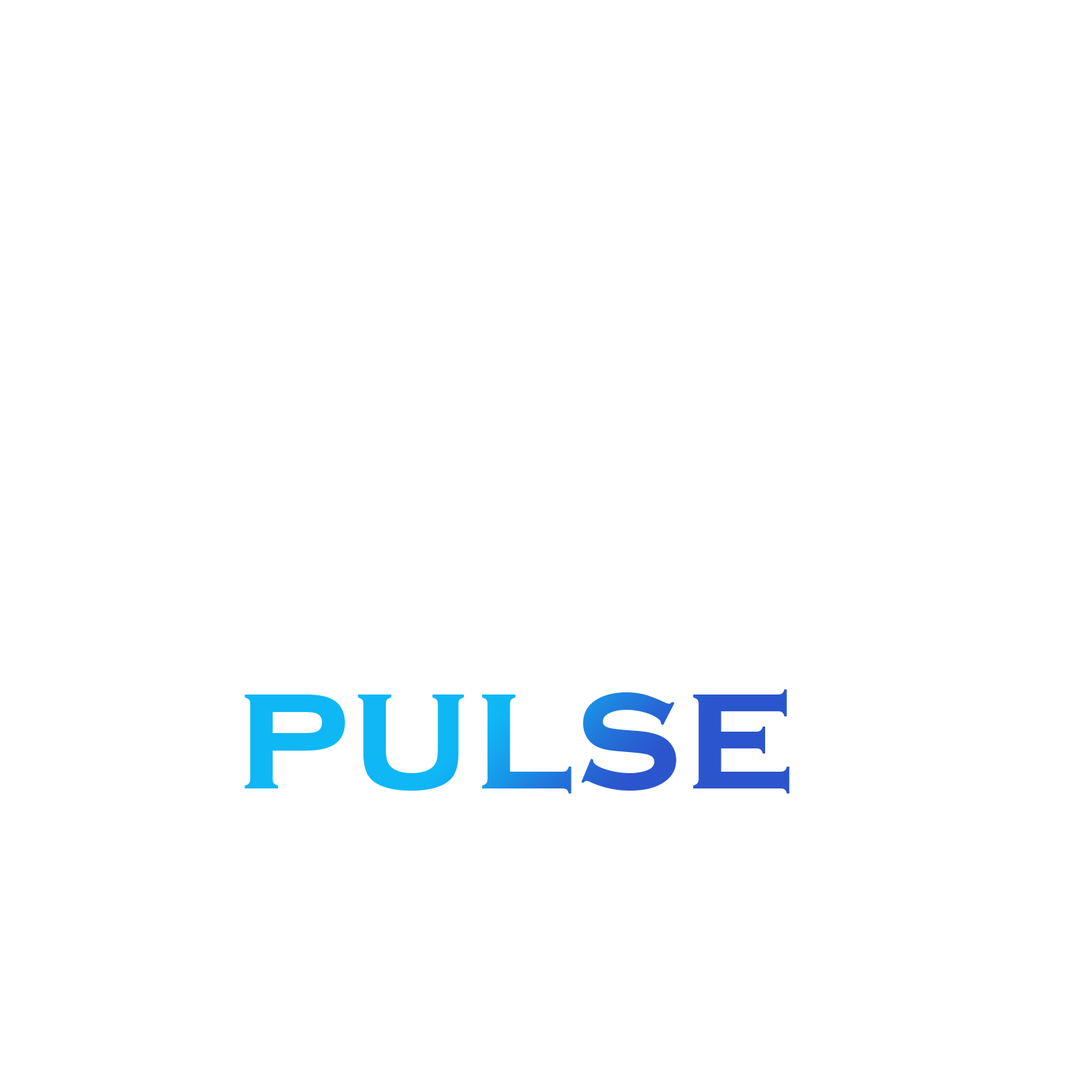
<style>
.page{position:relative;width:1092px;height:1092px;background:#ffffff}
.page>*{position:absolute;margin:0}
.t1{font:171.8px "CopperplateGothic-Bold";letter-spacing:0.02em}
</style>
<div class="page">
<p class="t1" style="left:245px;top:689px;width:545px;height:105px">pulse</p>
</div>
